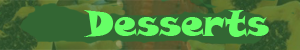
<style>
.page{position:relative;width:300px;height:50px;background:#336633}
.page>*{position:absolute;margin:0}
.t1{font:36px "SnapITC-Regular";color:#66ff66}
</style>
<div class="page">
<p class="t1" style="left:84px;top:10px;width:185px;height:27px">Desserts</p>
</div>
